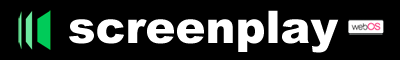
<style>
.page{position:relative;width:400px;height:60px;background:#000000}
.page>*{position:absolute;margin:0}
.t1{font:45px "Arial-Black";color:#ffffff}
</style>
<div class="page">
<p class="t1" style="left:69px;top:10px;width:270px;height:43px">screenplay</p>
</div>
